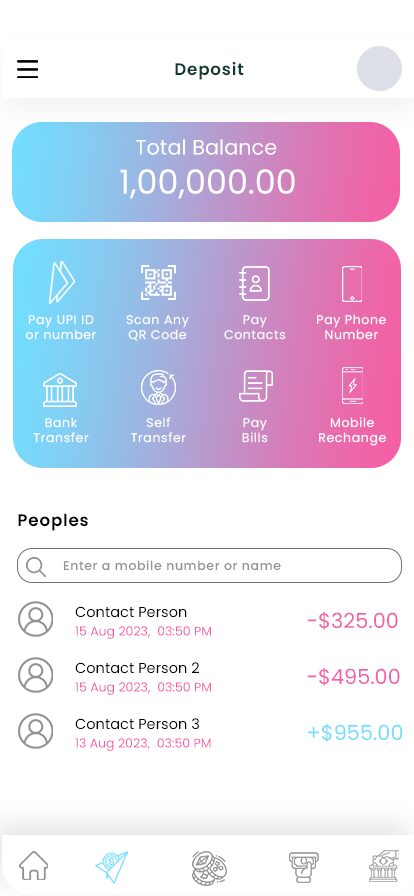
<style>
.page{position:relative;width:414px;height:896px;background:#ffffff}
.page>*{position:absolute;margin:0}
.t1{font:16.7px "Poppins-SemiBold";letter-spacing:0.05em;color:#0e3a2f}
.t2{font:20.8px "Poppins-Regular";color:#ffffff}
.t3{font:33.3px "Poppins-Regular";color:#ffffff}
.t4{font:12.5px "Poppins-Regular";letter-spacing:0.05em;color:#ffffff}
.t5{font:16.7px "Poppins-SemiBold";letter-spacing:0.05em;color:#010101}
.t6{font:12.5px "Poppins-Medium";letter-spacing:0.05em;color:#939393}
.t7{font:14.6px "Poppins-Regular";color:#010101}
.t8{font:20.8px "Poppins-Regular";color:#f460a4}
.t9{font:12.5px "Poppins-Regular";color:#f460a4}
.t10{font:20.8px "Poppins-Regular";color:#73ddfe}
</style>
<div class="page">
<p class="t1" style="left:175px;top:62px;width:69px;height:18px">Deposit</p>
<p class="t2" style="left:136px;top:139px;width:141px;height:16px">Total Balance</p>
<p class="t3" style="left:120px;top:169px;width:175px;height:30px">1,00,000.00</p>
<p class="t4" style="left:25px;top:315px;width:71px;height:25px;text-align:center">Pay UPI ID<br>or number</p>
<p class="t4" style="left:126px;top:315px;width:63px;height:26px;text-align:center">Scan Any<br>QR Code</p>
<p class="t4" style="left:224px;top:315px;width:62px;height:25px;text-align:center">Pay<br>Contacts</p>
<p class="t4" style="left:317px;top:314px;width:69px;height:26px;text-align:center">Pay Phone<br>Number</p>
<p class="t4" style="left:33px;top:417px;width:56px;height:26px;text-align:center">Bank<br>Transfer</p>
<p class="t4" style="left:131px;top:417px;width:55px;height:26px;text-align:center">Self<br>Transfer</p>
<p class="t4" style="left:242px;top:418px;width:26px;height:25px;text-align:center">Pay<br>Bills</p>
<p class="t4" style="left:319px;top:417px;width:67px;height:29px;text-align:center">Mobile<br>Rechange</p>
<p class="t5" style="left:18px;top:513px;width:70px;height:18px">Peoples</p>
<p class="t6" style="left:63px;top:560px;width:218px;height:11px">Enter a mobile number or name</p>
<p class="t7" style="left:75px;top:606px;width:112px;height:12px">Contact Person</p>
<p class="t8" style="left:307px;top:611px;width:91px;height:19px">-$325.00</p>
<p class="t9" style="left:75px;top:626px;width:136px;height:13px">15 Aug 2023,  03:50 PM</p>
<p class="t7" style="left:75px;top:662px;width:124px;height:12px">Contact Person 2</p>
<p class="t8" style="left:307px;top:667px;width:93px;height:19px">-$495.00</p>
<p class="t9" style="left:75px;top:682px;width:136px;height:13px">15 Aug 2023,  03:50 PM</p>
<p class="t7" style="left:75px;top:718px;width:124px;height:12px">Contact Person 3</p>
<p class="t10" style="left:308px;top:723px;width:95px;height:19px">+$955.00</p>
<p class="t9" style="left:75px;top:738px;width:136px;height:13px">13 Aug 2023,  03:50 PM</p>
</div>
